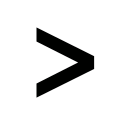
<style>
.page{position:relative;width:128px;height:128px;background:#ffffff}
.page>*{position:absolute;margin:0}
.t1{font:133px "FranklinGothic-Medium";color:#1c2802}
</style>
<div class="page">
<p class="t1" style="left:36px;top:27px;width:59px;height:71px">&gt;</p>
</div>
